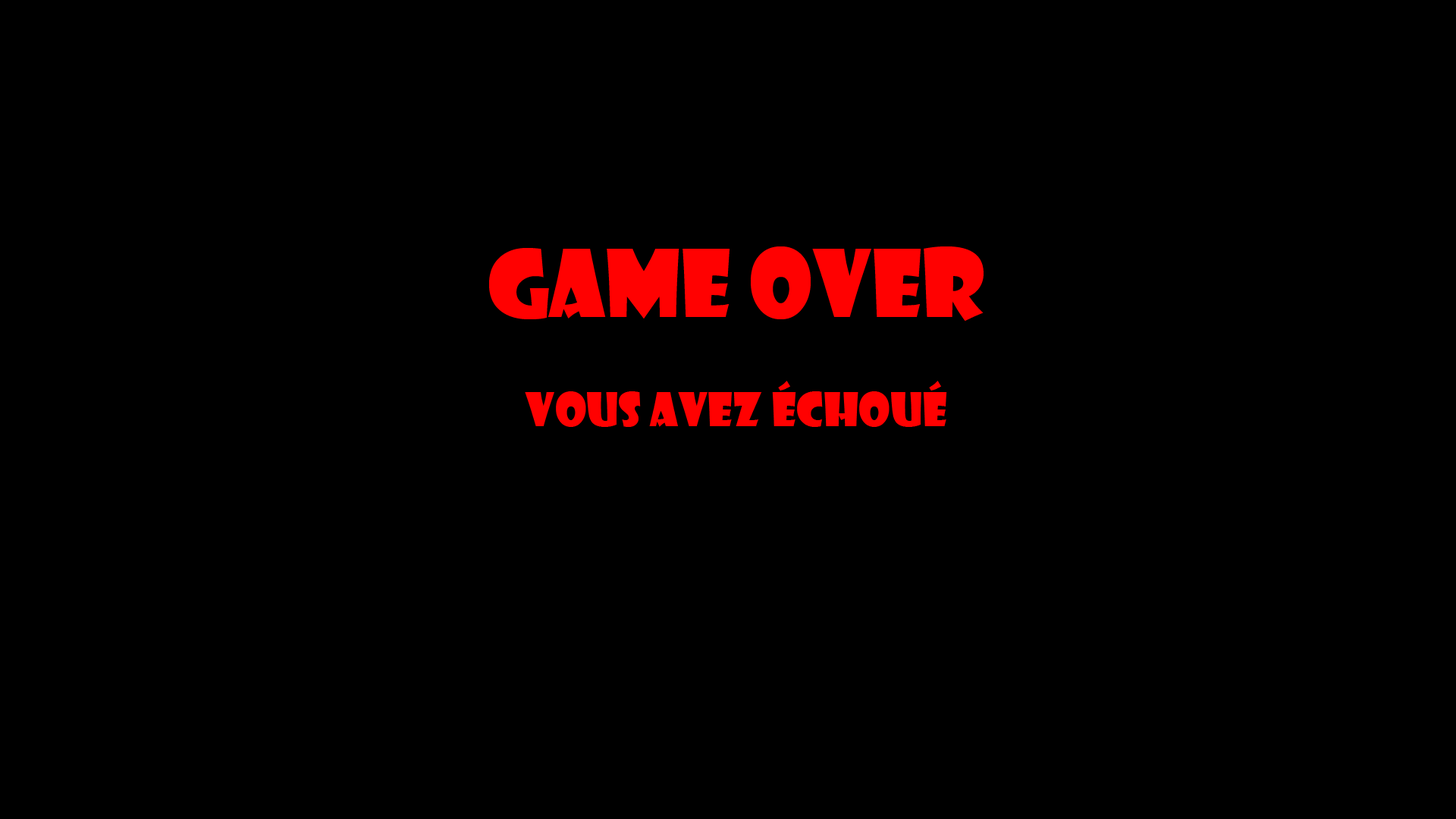
<style>
.page{position:relative;width:1456px;height:819px;background:#000000}
.page>*{position:absolute;margin:0}
.t1{font:45.5px "ShowcardGothic-Reg";color:#ff0101}
.t2{font:91px "ShowcardGothic-Reg";color:#ff0101}
</style>
<div class="page">
<p class="t1" style="left:489px;top:246px;width:495px;height:181px;text-align:center"><span class="t2">GAME oVER<br></span>vous avez échoué</p>
</div>
